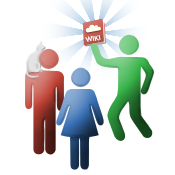
<style>
.page{position:relative;width:175px;height:175px;background:#ffffff}
.page>*{position:absolute;margin:0}
.t1{font:7.4px "Candara";color:#ffffff}
</style>
<div class="page">
<p class="t1" style="left:85px;top:35px;width:16px;height:7px;rotate:-11deg">WIKI</p>
</div>
